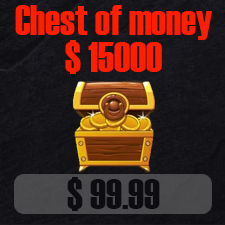
<style>
.page{position:relative;width:225px;height:225px}
.page>*{position:absolute;margin:0}
.t1{font:41.7px "Haettenschweiler";color:#ff1e00}
.t2{font:41.7px "Haettenschweiler";color:#0d0c11}
</style>
<div class="page">
<p class="t1" style="left:15px;top:5px;width:197px;height:35px">Chest of money</p>
<p class="t1" style="left:65px;top:40px;width:97px;height:34px">$ 15000</p>
<p class="t2" style="left:67px;top:177px;width:93px;height:34px">$ 99.99</p>
</div>
